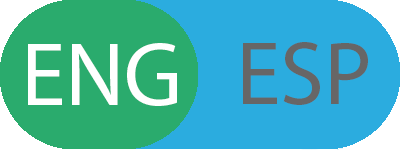
<style>
.page{position:relative;width:400px;height:150px;background:#2bacdf}
.page>*{position:absolute;margin:0}
.t1{font:90px "MyriadPro-Regular";color:#ffffff}
.t2{font:90px "MyriadPro-Regular";color:#676666}
</style>
<div class="page">
<p class="t1" style="left:28px;top:43px;width:149px;height:63px">ENG</p>
<p class="t2" style="left:243px;top:42px;width:125px;height:63px">ESP</p>
</div>
